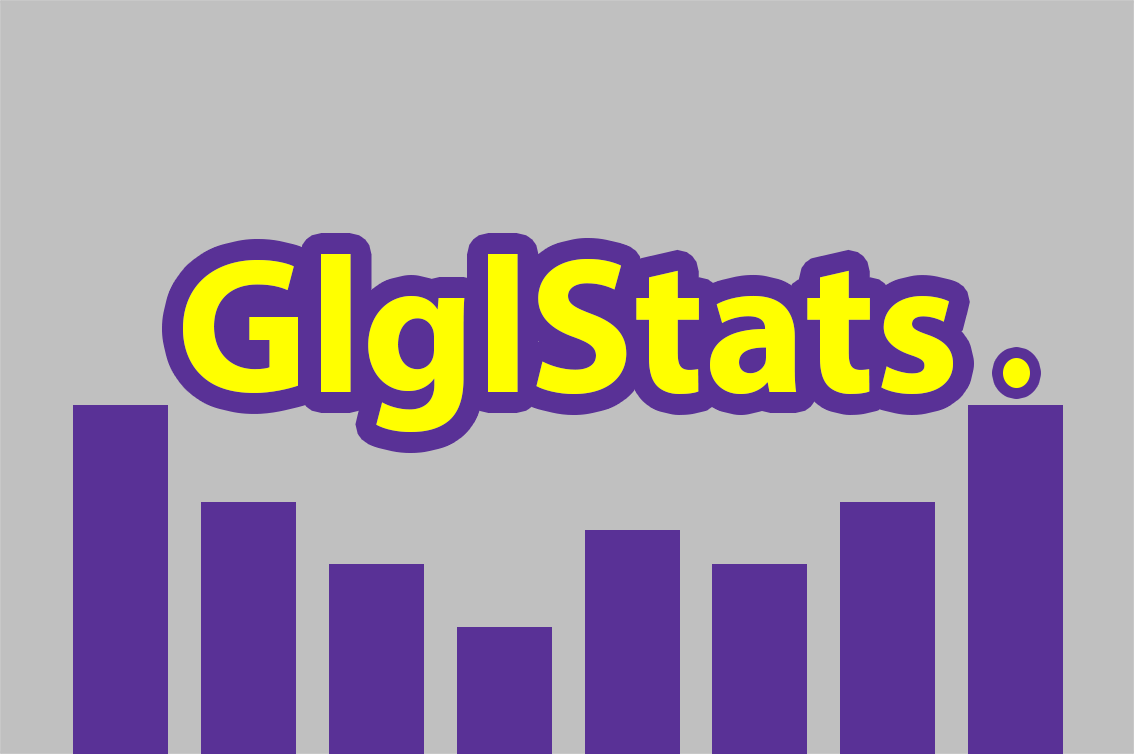
<style>
.page{position:relative;width:1134px;height:754px;background:#c0c0c0}
.page>*{position:absolute;margin:0}
.t1{font:193.9px "MyriadPro-Bold";color:#ffff00}
</style>
<div class="page">
<p class="t1" style="left:183px;top:254px;width:770px;height:178px">GlglStats</p>
</div>
